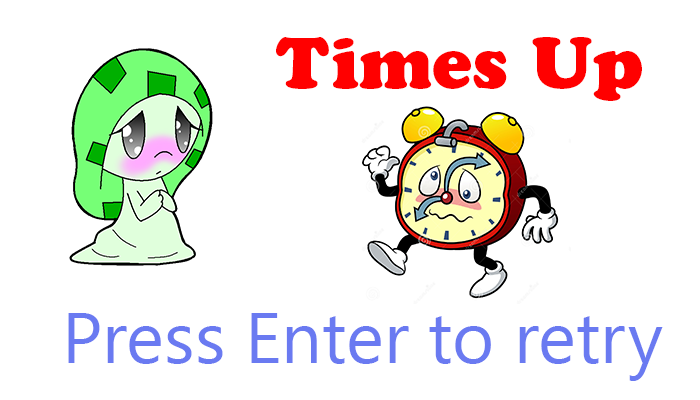
<style>
.page{position:relative;width:700px;height:400px;background:#ffffff}
.page>*{position:absolute;margin:0}
.t1{font:72px "CooperBlackStd";color:#ff0000}
.t2{font:72px "LaoUI";color:#6a7af1}
</style>
<div class="page">
<p class="t1" style="left:276px;top:37px;width:366px;height:64px">Times Up</p>
<p class="t2" style="left:68px;top:313px;width:595px;height:68px">Press Enter to retry</p>
</div>
